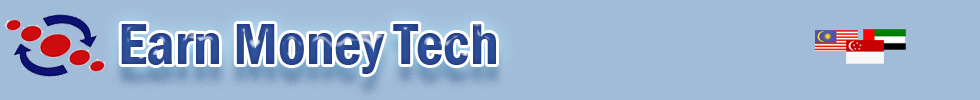
<style>
.page{position:relative;width:980px;height:100px;background:#a1bcd9}
.page>*{position:absolute;margin:0}
.t1{font:60px "FranklinGothic-DemiCond";color:#294990}
</style>
<div class="page">
<p class="t1" style="left:121px;top:24px;width:375px;height:50px">Earn Money Tech</p>
</div>
